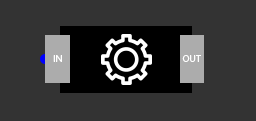
<style>
.page{position:relative;width:256px;height:121px;background:#333333}
.page>*{position:absolute;margin:0}
.t1{font:10px "MyriadPro-Regular";color:#ffffff}
</style>
<div class="page">
<p class="t1" style="left:53px;top:55px;width:9px;height:7px">IN</p>
<p class="t1" style="left:182px;top:55px;width:19px;height:7px">OUT</p>
</div>
